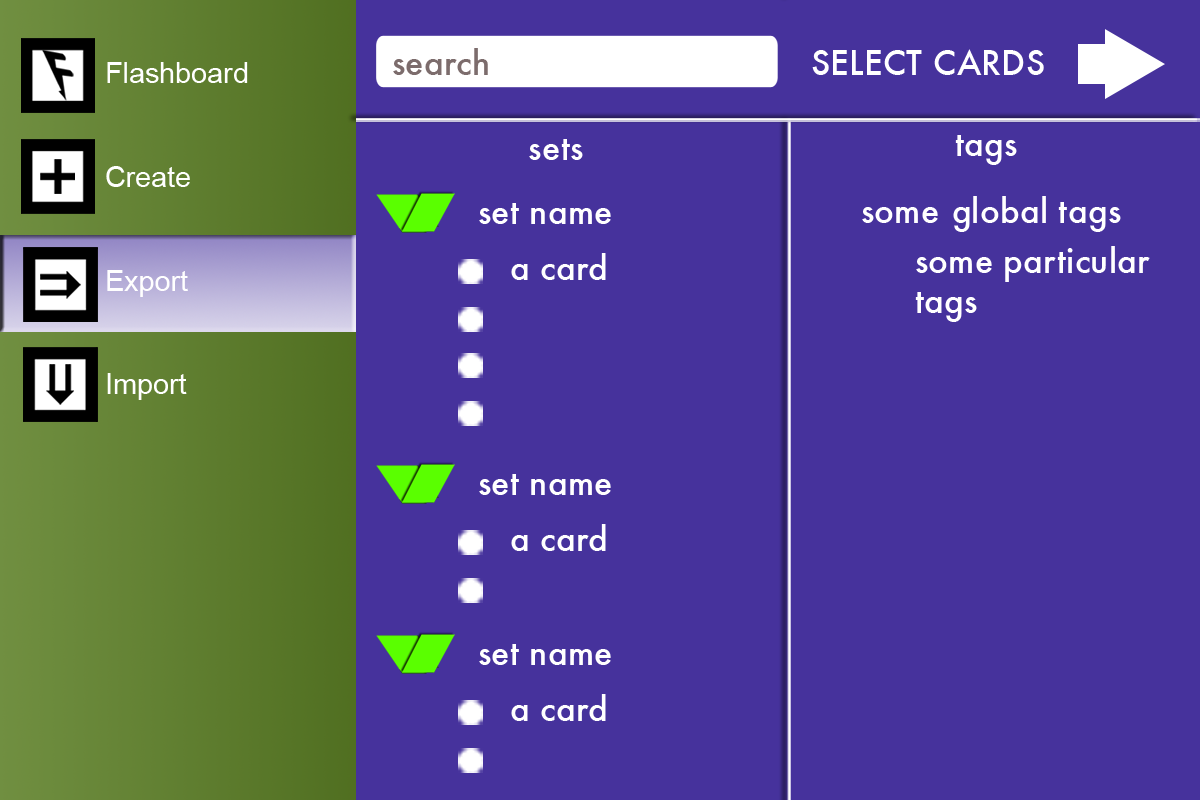
<style>
.page{position:relative;width:1200px;height:800px;background:#46329c}
.page>*{position:absolute;margin:0}
.t1{font:33.3px "Futura-Medium";color:#7c6c6c}
.t2{font:33.3px "Futura-Medium";color:#ffffff}
.t3{font:28.8px "ArialMT";color:#ffffff}
</style>
<div class="page">
<p class="t1" style="left:393px;top:48px;width:95px;height:27px">search</p>
<p class="t2" style="left:812px;top:49px;width:232px;height:26px">SELECT CARDS</p>
<p class="t3" style="left:106px;top:62px;width:142px;height:338px">Flashboard<br><br><br>Create<br><br><br>Export<br><br><br>Import</p>
<p class="t2" style="left:955px;top:135px;width:62px;height:30px">tags</p>
<p class="t2" style="left:529px;top:139px;width:54px;height:21px">sets</p>
<p class="t2" style="left:862px;top:196px;width:259px;height:36px">some global tags</p>
<p class="t2" style="left:479px;top:203px;width:132px;height:21px">set name</p>
<p class="t2" style="left:915px;top:246px;width:235px;height:76px">some particular<br>tags</p>
<p class="t2" style="left:511px;top:253px;width:95px;height:27px">a card</p>
<p class="t2" style="left:479px;top:474px;width:132px;height:21px">set name</p>
<p class="t2" style="left:511px;top:524px;width:95px;height:27px">a card</p>
<p class="t2" style="left:479px;top:644px;width:132px;height:21px">set name</p>
<p class="t2" style="left:511px;top:694px;width:95px;height:27px">a card</p>
</div>
